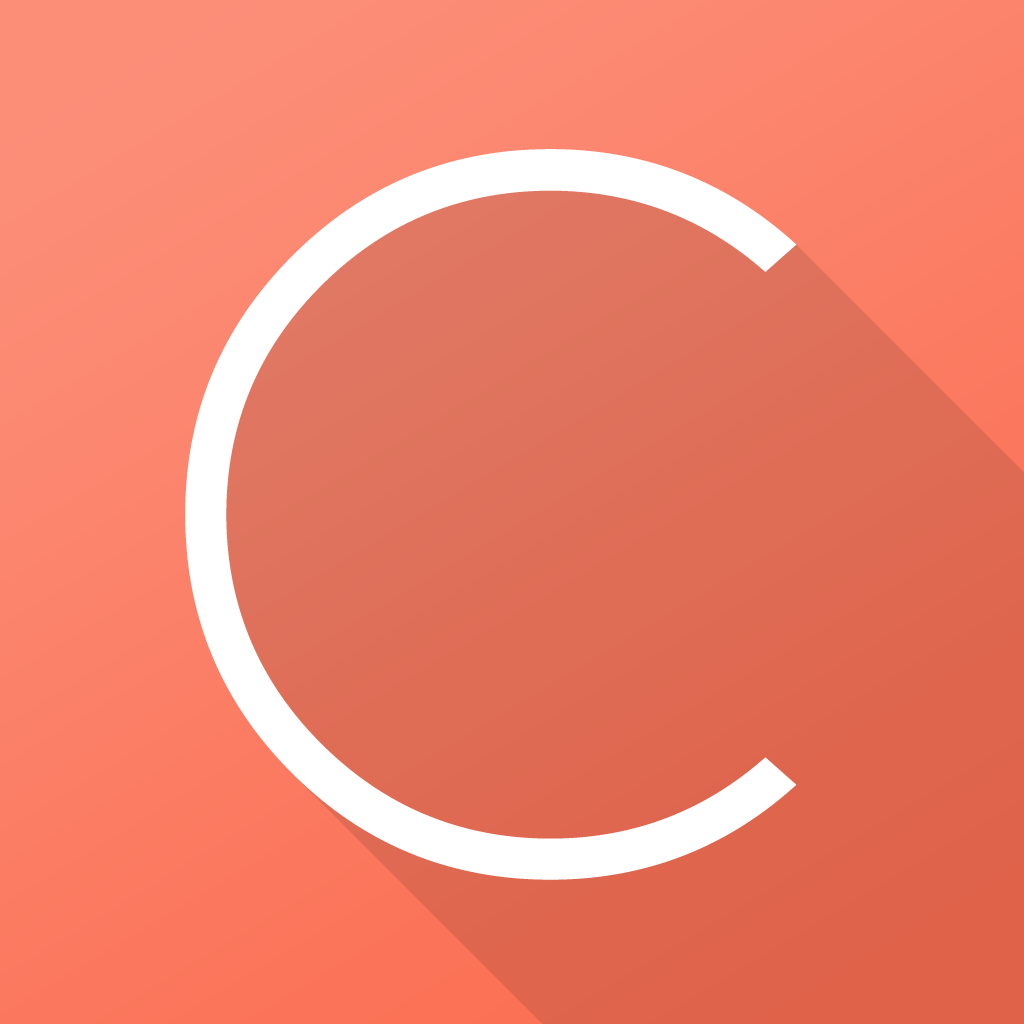
<style>
.page{position:relative;width:1024px;height:1024px}
.page>*{position:absolute;margin:0}
.t1{font:1033.2px "Champagne&Limousines";color:#ffffff}
</style>
<div class="page">
<p class="t1" style="left:185px;top:149px;width:612px;height:731px">C</p>
</div>
